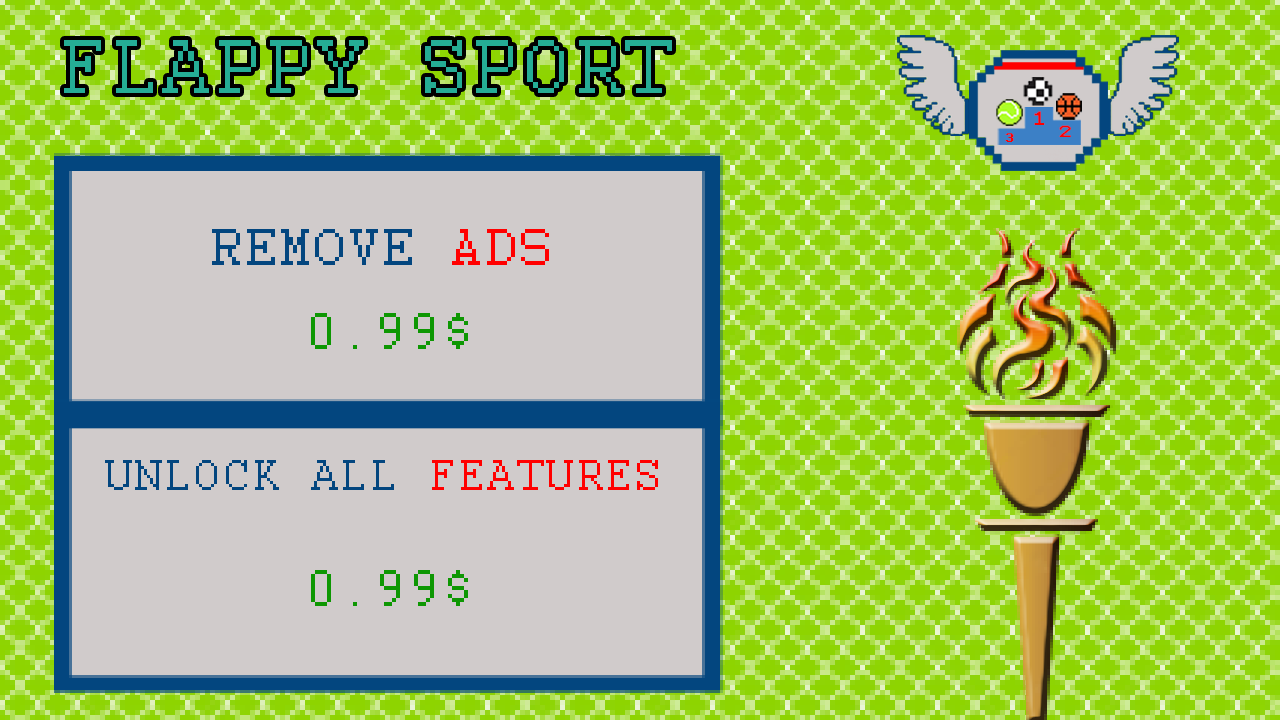
<style>
.page{position:relative;width:1280px;height:720px;background:#d0cbcb}
.page>*{position:absolute;margin:0}
.t1{font:84px "Courier";letter-spacing:0.05em;color:#25ad95;font-variant:small-caps}
.t2{font:15.4px "Terminal";letter-spacing:0.001em;color:#ff0000;font-variant:small-caps;scale:1.27 1}
.t3{font:12.8px "Terminal";letter-spacing:0.001em;color:#ff0000;font-variant:small-caps;scale:1.24 1}
.t4{font:12.2px "Terminal";letter-spacing:0.001em;color:#ff0000;font-variant:small-caps;scale:1.27 1}
.t5{font:56px "Courier";letter-spacing:0.05em;color:#03467f;font-variant:small-caps}
.t6{font:56px "Courier";letter-spacing:0.05em;color:#ff0000;font-variant:small-caps}
.t7{font:56px "Courier";letter-spacing:0.05em;color:#0d9702;font-variant:small-caps}
.t8{font:48px "Courier";letter-spacing:0.05em;color:#03467f;font-variant:small-caps}
.t9{font:48px "Courier";letter-spacing:0.05em;color:#ff0000;font-variant:small-caps}
</style>
<div class="page">
<p class="t1" style="left:64px;top:40px;width:608px;height:53px">FLAPPY SPORT</p>
<p class="t2" style="left:1034px;top:111px;width:11px;height:14px">1</p>
<p class="t3" style="left:1059px;top:125px;width:12px;height:12px">2</p>
<p class="t4" style="left:1005px;top:133px;width:9px;height:9px">3</p>
<p class="t5" style="left:212px;top:229px;width:337px;height:36px">REMOVE <span class="t6">ADS</span></p>
<p class="t7" style="left:311px;top:313px;width:157px;height:36px">0.99$</p>
<p class="t8" style="left:105px;top:460px;width:553px;height:30px">UNLOCK ALL <span class="t9">FEATURES</span></p>
<p class="t7" style="left:311px;top:570px;width:157px;height:36px">0.99$</p>
</div>
